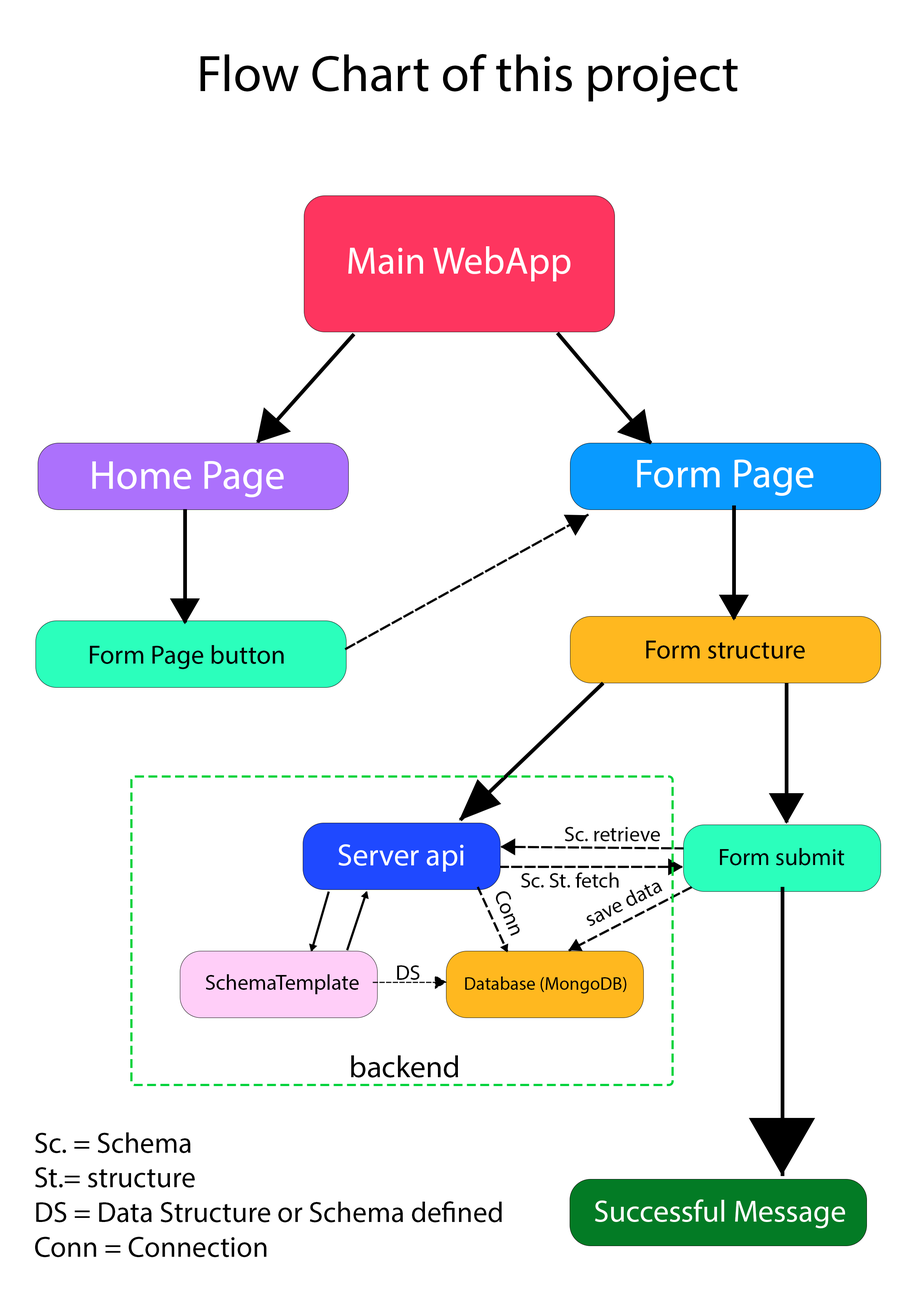
<style>
.page{position:relative;width:918px;height:1299px;background:#ffffff}
.page>*{position:absolute;margin:0}
.t1{font:51.9px "MyriadPro-Regular";color:#000000}
.t2{font:38.3px "MyriadPro-Regular";color:#ffffff}
.t3{font:40.8px "MyriadPro-Regular";color:#ffffff}
.t4{font:26.2px "MyriadPro-Regular";color:#000000}
.t5{font:21.2px "MyriadPro-Regular";color:#000000}
.t6{font:30.9px "MyriadPro-Regular";color:#ffffff}
.t7{font:23.9px "MyriadPro-Regular";color:#000000}
.t8{font:21.6px "MyriadPro-Regular";color:#000000}
.t9{font:18.4px "MyriadPro-Regular";color:#000000}
.t10{font:31px "MyriadPro-Regular";color:#000000}
.t11{font:28.9px "MyriadPro-Regular";color:#000000}
</style>
<div class="page">
<p class="t1" style="left:200px;top:54px;width:538px;height:48px">Flow Chart of this project</p>
<p class="t2" style="left:348px;top:246px;width:223px;height:35px">Main WebApp</p>
<p class="t3" style="left:92px;top:461px;width:192px;height:36px">Home Page</p>
<p class="t3" style="left:637px;top:459px;width:177px;height:37px">Form Page</p>
<p class="t4" style="left:646px;top:640px;width:159px;height:19px">Form structure</p>
<p class="t4" style="left:90px;top:645px;width:194px;height:24px">Form Page button</p>
<p class="t5" style="left:565px;top:827px;width:95px;height:14px">Sc. retrieve</p>
<p class="t6" style="left:338px;top:844px;width:126px;height:28px">Server api</p>
<p class="t7" style="left:720px;top:848px;width:124px;height:17px">Form submit</p>
<p class="t5" style="left:521px;top:872px;width:98px;height:15px">Sc. St. fetch</p>
<p class="t5" style="left:496px;top:891px;width:24px;height:45px;rotate:68deg">Conn</p>
<p class="t5" style="left:587px;top:882px;width:76px;height:44px;rotate:-26deg">save data</p>
<p class="t5" style="left:397px;top:965px;width:22px;height:15px">DS</p>
<p class="t8" style="left:206px;top:974px;width:153px;height:20px">SchemaTemplate</p>
<p class="t9" style="left:465px;top:976px;width:161px;height:17px">Database (MongoDB)</p>
<p class="t10" style="left:351px;top:1055px;width:107px;height:22px">backend</p>
<p class="t11" style="left:35px;top:1132px;width:467px;height:125px">Sc. = Schema<br>St.= structure<br>DS = Data Structure or Schema defined<br>Conn = Connection</p>
<p class="t6" style="left:595px;top:1199px;width:250px;height:29px">Successful Message</p>
</div>
